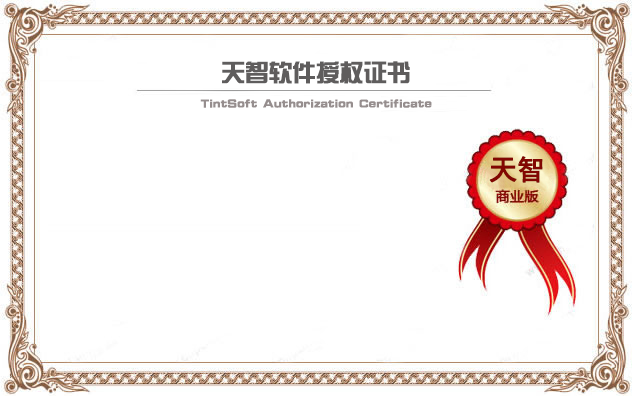
<style>
.page{position:relative;width:632px;height:396px;background:#ffffff}
.page>*{position:absolute;margin:0}
.t1{font:24px "ç»å¸ç»¼èºä½ç®-regular";letter-spacing:-0.04em;color:#5f5d5d;font-weight:bold}
.t2{font:12px "ç»å¸ç»¼èºä½ç®-regular";letter-spacing:-0.04em;color:#968e8e;font-weight:bold}
.t3{font:28px "SimHei";letter-spacing:-0.04em;color:#820702;font-weight:bold}
</style>
<div class="page">
<p class="t1" style="left:222px;top:61px;width:188px;height:23px">天智软件授权证书</p>
<p class="t2" style="left:200px;top:99px;width:232px;height:9px">TintSoft Authorization Certificate</p>
<p class="t3" style="left:489px;top:156px;width:54px;height:27px">天智</p>
</div>
